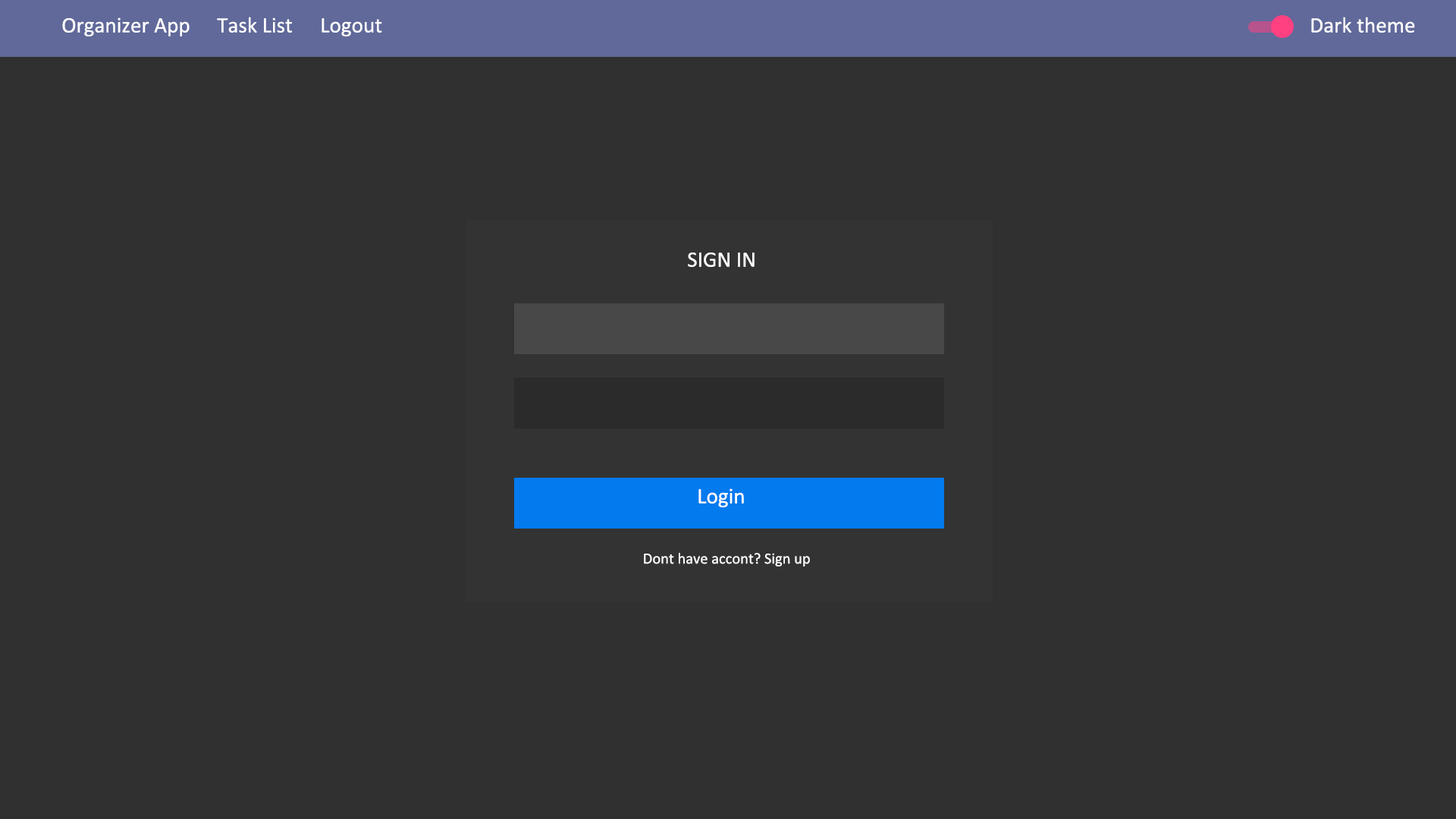
<style>
.page{position:relative;width:1456px;height:819px;background:#303030}
.page>*{position:absolute;margin:0}
.t1{font:22.1px "Calibri";color:#ffffff}
.t2{font:15.6px "Calibri";color:#ffffff}
</style>
<div class="page">
<p class="t1" style="left:62px;top:17px;width:128px;height:19px">Organizer App</p>
<p class="t1" style="left:217px;top:17px;width:75px;height:16px">Task List</p>
<p class="t1" style="left:1311px;top:17px;width:104px;height:16px">Dark theme</p>
<p class="t1" style="left:322px;top:18px;width:60px;height:18px">Logout</p>
<p class="t1" style="left:688px;top:253px;width:67px;height:14px">SIGN IN</p>
<p class="t1" style="left:698px;top:488px;width:46px;height:19px">Login</p>
<p class="t2" style="left:644px;top:553px;width:166px;height:13px">Dont have accont? Sign up</p>
</div>
